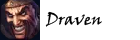
<style>
.page{position:relative;width:140px;height:40px;background:#ffffff}
.page>*{position:absolute;margin:0}
.t1{font:12px "VinerHandITC";color:#000000}
</style>
<div class="page">
<p class="t1" style="left:45px;top:11px;width:57px;height:16px">Draven</p>
</div>
